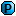
<style>
.page{position:relative;width:16px;height:16px;background:#ffffff}
.page>*{position:absolute;margin:0}
.t1{font:12px "Arial-BoldMT";color:#000000}
</style>
<div class="page">
<p class="t1" style="left:4px;top:4px;width:8px;height:9px">P</p>
</div>
